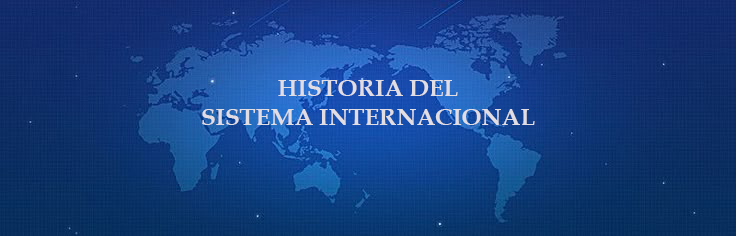
<style>
.page{position:relative;width:736px;height:236px}
.page>*{position:absolute;margin:0}
.t1{font:24px "BookAntiqua-Bold";color:#e2dde3}
</style>
<div class="page">
<p class="t1" style="left:202px;top:80px;width:333px;height:45px;text-align:center">HISTORIA DEL<br>SISTEMA INTERNACIONAL</p>
</div>
